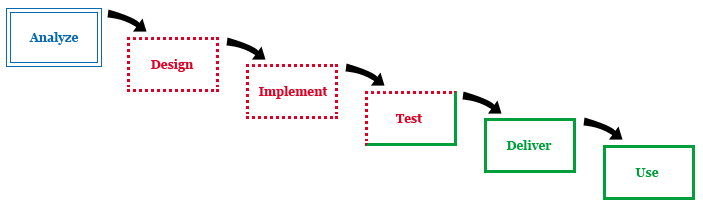
<style>
.page{position:relative;width:703px;height:208px;background:#ffffff}
.page>*{position:absolute;margin:0}
.t1{font:12px "Georgia-Bold";color:#0669b2}
.t2{font:12px "Georgia-Bold";color:#df0024}
.t3{font:12px "Georgia-Bold";color:#009f3c}
</style>
<div class="page">
<p class="t1" style="left:29px;top:32px;width:50px;height:13px">Analyze</p>
<p class="t2" style="left:151px;top:59px;width:43px;height:13px">Design</p>
<p class="t2" style="left:259px;top:86px;width:69px;height:13px">Implement</p>
<p class="t2" style="left:395px;top:114px;width:27px;height:9px">Test</p>
<p class="t3" style="left:506px;top:140px;width:46px;height:10px">Deliver</p>
<p class="t3" style="left:635px;top:168px;width:24px;height:9px">Use</p>
</div>
